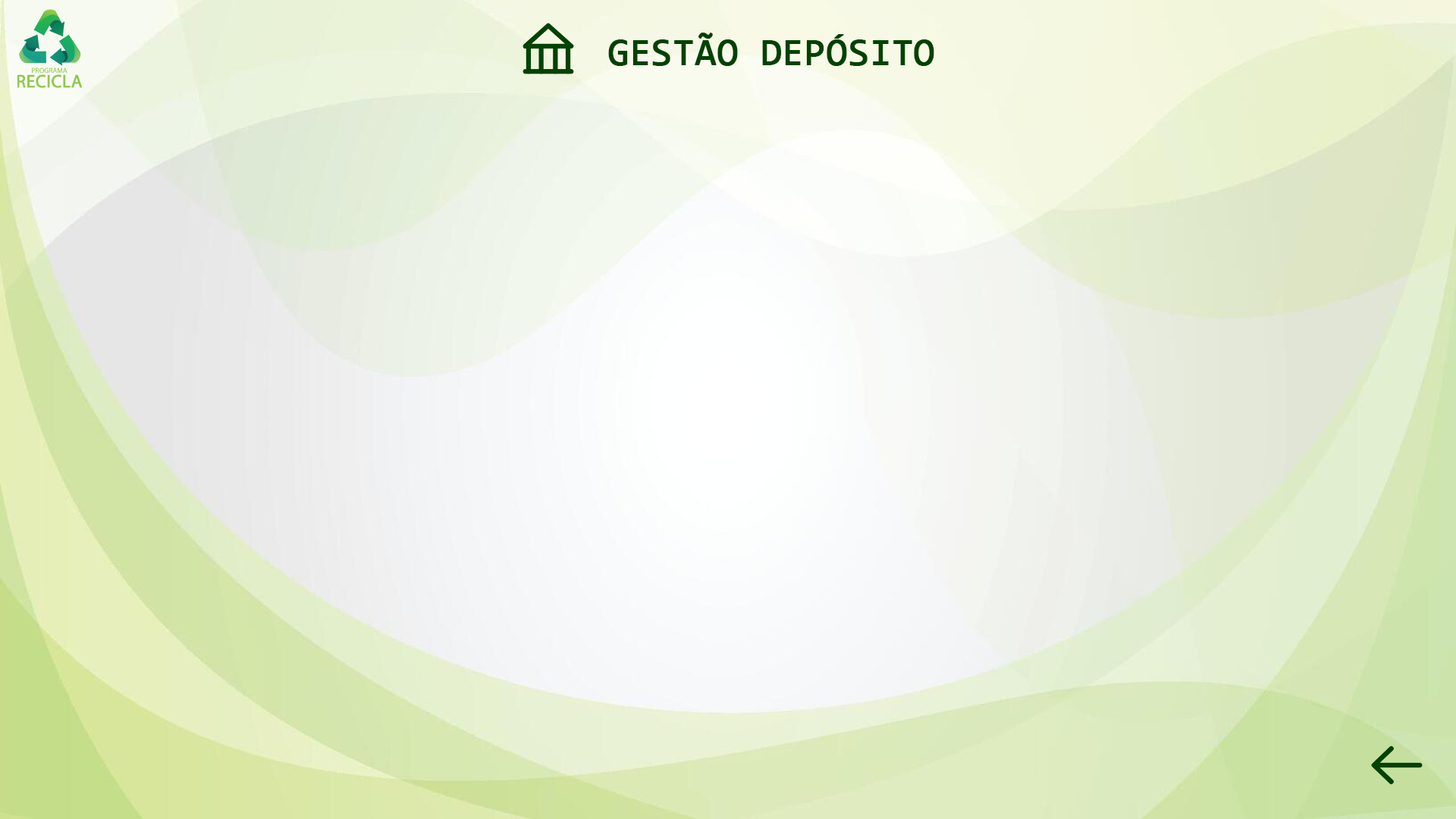
<style>
.page{position:relative;width:1456px;height:819px}
.page>*{position:absolute;margin:0}
.t1{font:37.9px "Consolas";color:#004201;font-weight:bold}
</style>
<div class="page">
<p class="t1" style="left:608px;top:33px;width:326px;height:33px">GESTÃO DEPÓSITO</p>
</div>
